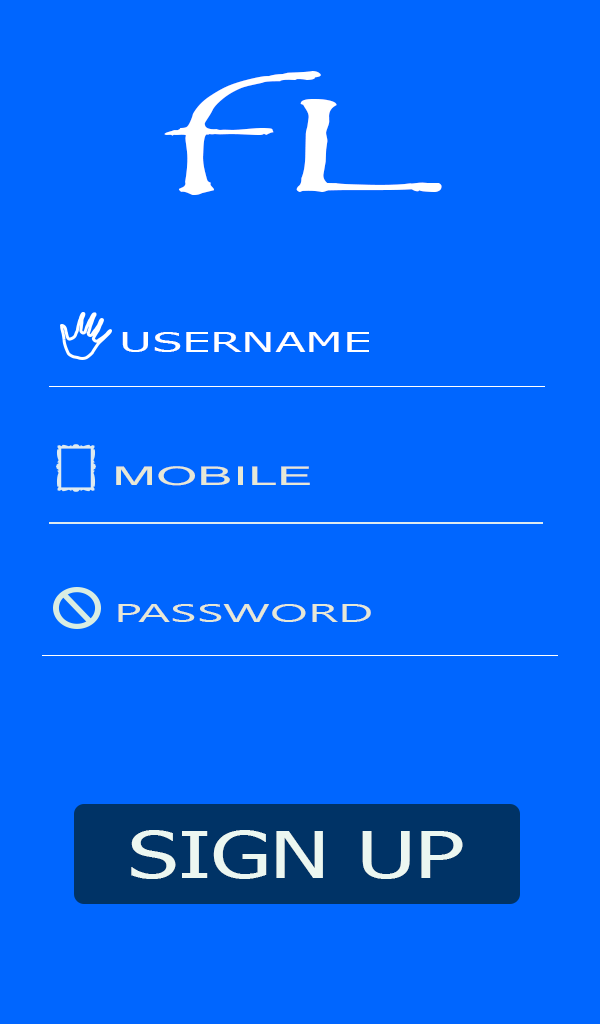
<style>
.page{position:relative;width:600px;height:1024px;background:#0066ff}
.page>*{position:absolute;margin:0}
.t1{font:135.2px "TempusSansITC";color:#ffffff;scale:2.71 1}
.t2{font:26.8px "Verdana";color:#ffffff;scale:1.67 1}
.t3{font:28.8px "Vrinda";color:#e6e8d6;scale:2.06 1}
.t4{font:26.2px "SegoeUI";color:#e6e8d6;scale:1.9 1}
.t5{font:64.9px "Tahoma";color:#ecf7f1;scale:1.37 1}
</style>
<div class="page">
<p class="t1" style="left:164px;top:71px;width:278px;height:124px">fL</p>
<p class="t2" style="left:122px;top:332px;width:247px;height:20px">USERNAME</p>
<p class="t3" style="left:116px;top:466px;width:194px;height:20px">MOBILE</p>
<p class="t4" style="left:118px;top:604px;width:253px;height:18px">PASSWORD</p>
<p class="t5" style="left:131px;top:830px;width:332px;height:49px">SIGN UP</p>
</div>
